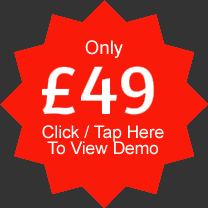
<style>
.page{position:relative;width:208px;height:208px;background:#fa1a09}
.page>*{position:absolute;margin:0}
.t1{font:18.7px "ArialMT";color:#ffffff}
.t2{font:17.3px/16px "ArialMT";color:#ffffff}
</style>
<div class="page">
<p class="t1" style="left:85px;top:40px;width:38px;height:18px">Only</p>
<p class="t2" style="left:42px;top:125px;width:122px;height:30px;text-align:center">Click / Tap Here<br>To View Demo</p>
</div>
